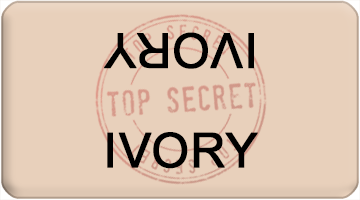
<style>
.page{position:relative;width:360px;height:200px;background:#e8d0bb}
.page>*{position:absolute;margin:0}
.t1{font:48px "ArialMT";color:#000000;font-weight:bold}
</style>
<div class="page">
<p class="t1" style="left:104px;top:32px;width:150px;height:37px;rotate:180deg">IVORY</p>
<p class="t1" style="left:107px;top:132px;width:151px;height:37px">IVORY</p>
</div>
